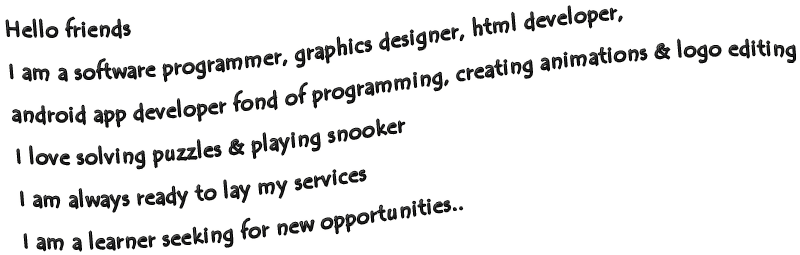
<style>
.page{position:relative;width:800px;height:255px;background:#ffffff}
.page>*{position:absolute;margin:0}
.t1{font:35.5px "TempusSansITC";letter-spacing:0.05em;color:#282828}
</style>
<div class="page">
<p class="t1" style="left:6px;top:6px;width:789px;height:245px;rotate:-5deg">Hello friends<br>I am a software programmer, graphics designer, html developer,<br>android app developer fond of programming, creating animations &amp; logo editing<br>I love solving puzzles &amp; playing snooker<br>I am always ready to lay my services<br>I am a learner seeking for new opportunities..</p>
</div>
